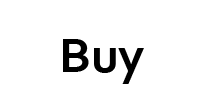
<style>
.page{position:relative;width:197px;height:100px;background:#ffffff}
.page>*{position:absolute;margin:0}
.t1{font:50.8px "Corbel-Bold";color:#000000}
</style>
<div class="page">
<p class="t1" style="left:63px;top:39px;width:81px;height:45px">Buy</p>
</div>
